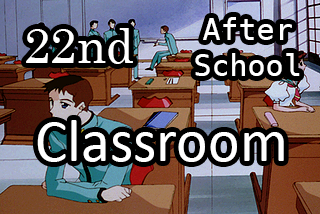
<style>
.page{position:relative;width:320px;height:214px}
.page>*{position:absolute;margin:0}
.t1{font:30px "DejaVuSansMono";color:#ffffff}
.t2{font:40px "Calibri";color:#ffffff}
.t3{font:48px "Century";color:#ffffff}
.t4{font:60px "Calibri";color:#ffffff}
</style>
<div class="page">
<p class="t1" style="left:195px;top:17px;width:105px;height:59px"><span class="t2"> </span>After<br>School</p>
<p class="t3" style="left:26px;top:28px;width:107px;height:36px">22nd</p>
<p class="t4" style="left:37px;top:120px;width:247px;height:42px">Classroom</p>
</div>
